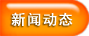
<style>
.page{position:relative;width:89px;height:36px}
.page>*{position:absolute;margin:0}
.t1{font:14px "SimHei";letter-spacing:0.1em;color:#feffff;font-weight:bold}
</style>
<div class="page">
<p class="t1" style="left:11px;top:12px;width:62px;height:14px">新闻动态</p>
</div>
